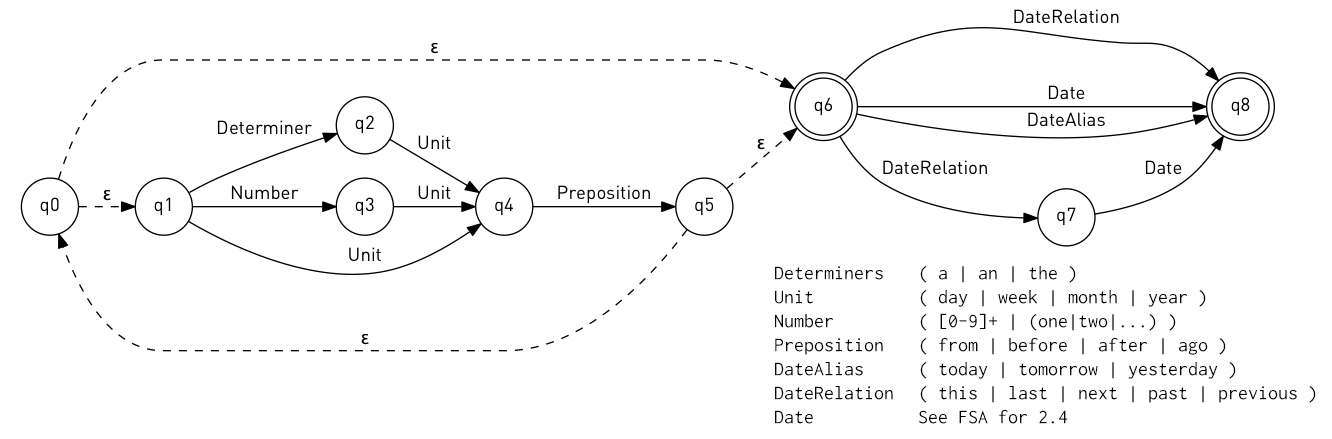
<style>
.page{position:relative;width:1332px;height:439px;background:#ffffff}
.page>*{position:absolute;margin:0}
.t1{font:20px "Inconsolata";color:#000000}
</style>
<div class="page">
<p class="t1" style="left:775px;top:266px;width:541px;height:158px">Determiners ( a | an | the )<br>Unit    ( day | week | month | year )<br>Number    ( [0-9]+ | (one|two|...) )<br>Preposition ( from | before | after | ago )<br>DateAlias  ( today | tomorrow | yesterday )<br>DateRelation ( this | last | next | past | previous )<br>Date   See FSA for 2.4</p>
</div>
